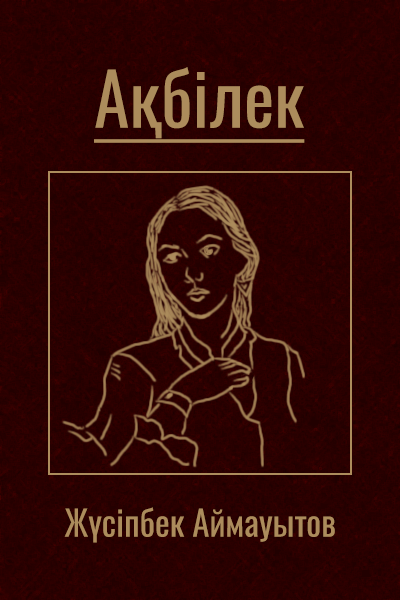
<style>
.page{position:relative;width:400px;height:600px}
.page>*{position:absolute;margin:0}
.t1{font:72px "Oswald-Regular";color:#ac8c5c;text-decoration:underline}
.t2{font:35px "Oswald-Regular";color:#ac8c5c}
</style>
<div class="page">
<p class="t1" style="left:94px;top:67px;width:211px;height:76px">Ақбілек</p>
<p class="t2" style="left:64px;top:507px;width:271px;height:36px">Жүсіпбек Аймауытов</p>
</div>
